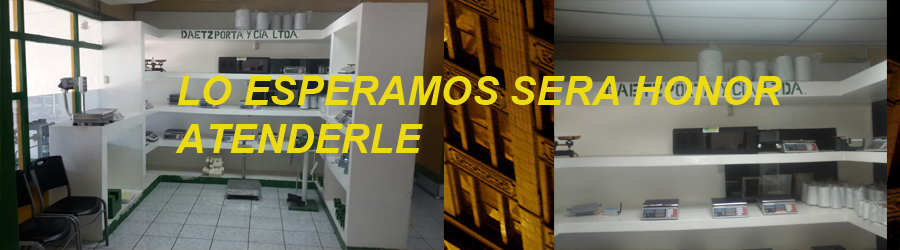
<style>
.page{position:relative;width:900px;height:250px}
.page>*{position:absolute;margin:0}
.t1{font:40px "Arial-BoldItalicMT";color:#ecda12}
</style>
<div class="page">
<p class="t1" style="left:175px;top:76px;width:607px;height:77px">LO ESPERAMOS SERA HONOR<br>ATENDERLE</p>
</div>
